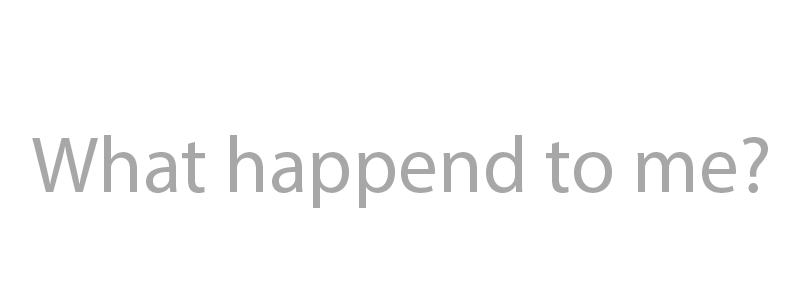
<style>
.page{position:relative;width:800px;height:300px;background:#ffffff}
.page>*{position:absolute;margin:0}
.t1{font:80px "MyriadPro-Regular";color:#a7a7a7}
</style>
<div class="page">
<p class="t1" style="left:32px;top:135px;width:736px;height:73px">What happend to me?</p>
</div>
